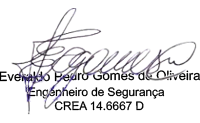
<style>
.page{position:relative;width:200px;height:123px;background:#ffffff}
.page>*{position:absolute;margin:0}
.t1{font:11.7px "ArialMT";color:#000000}
.t2{font:13.1px "ArialMT";color:#000000}
</style>
<div class="page">
<p class="t1" style="left:0px;top:70px;width:200px;height:41px"><span class="t2">Everaldo Pedro Gomes de Oliveira<br>        </span>Engenheiro de Segurança<br>                 CREA 14.6667 D</p>
</div>
